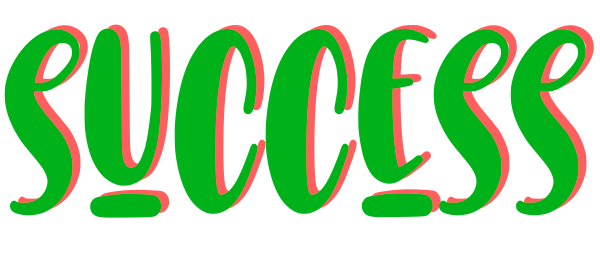
<style>
.page{position:relative;width:600px;height:255px;background:#ffffff}
.page>*{position:absolute;margin:0}
.t1{font:199px "ChocoLetter";color:#00b219;scale:0.87 1}
</style>
<div class="page">
<p class="t1" style="left:4px;top:28px;width:582px;height:190px">success</p>
</div>
